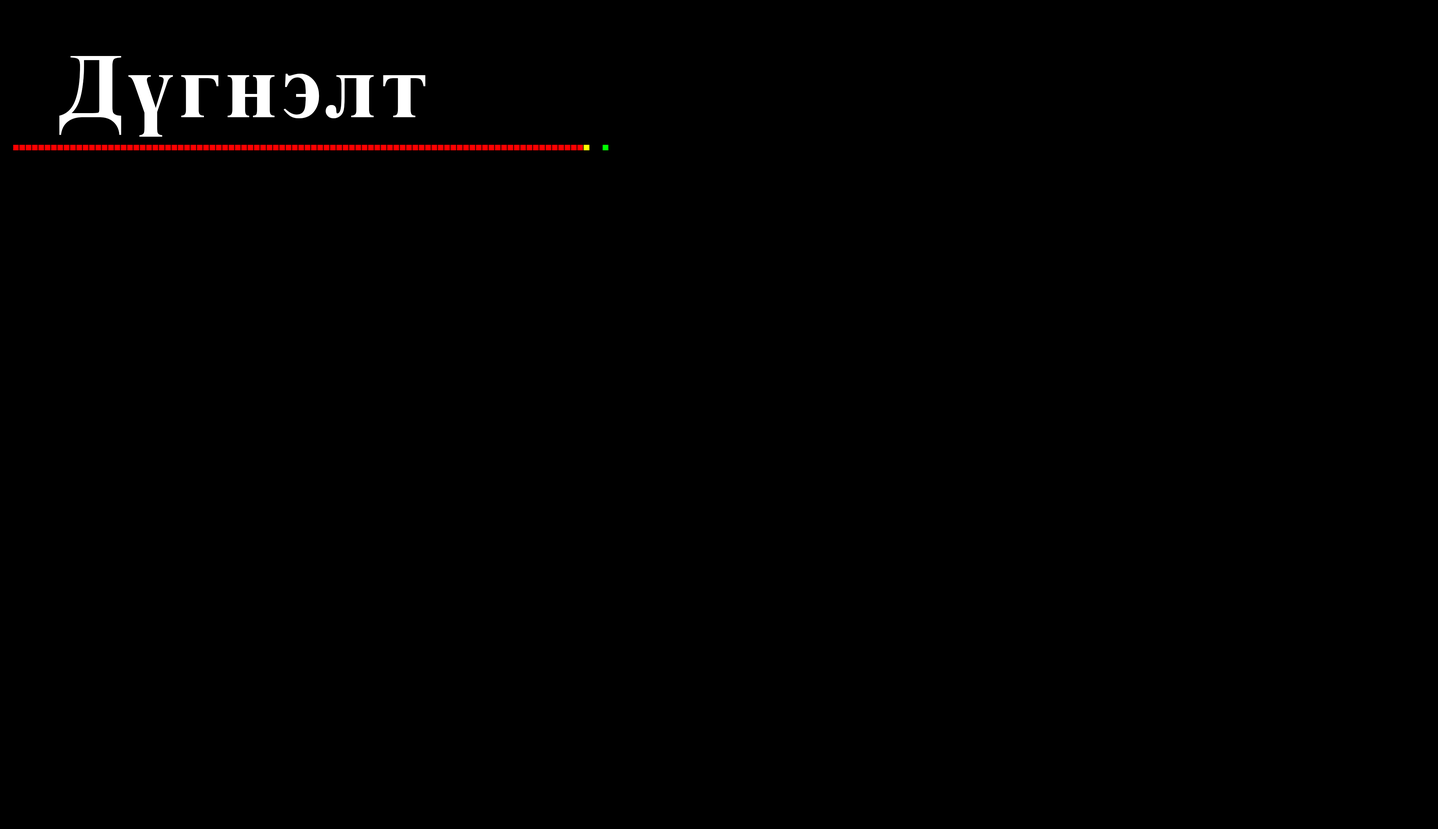
<style>
.page{position:relative;width:1438px;height:829px;background:#000000}
.page>*{position:absolute;margin:0}
.t1{font:92.2px "TimesNewRomanPS-BoldMT";letter-spacing:0.05em;color:#ffffff}
</style>
<div class="page">
<p class="t1" style="left:59px;top:56px;width:366px;height:81px">Дүгнэлт</p>
</div>
